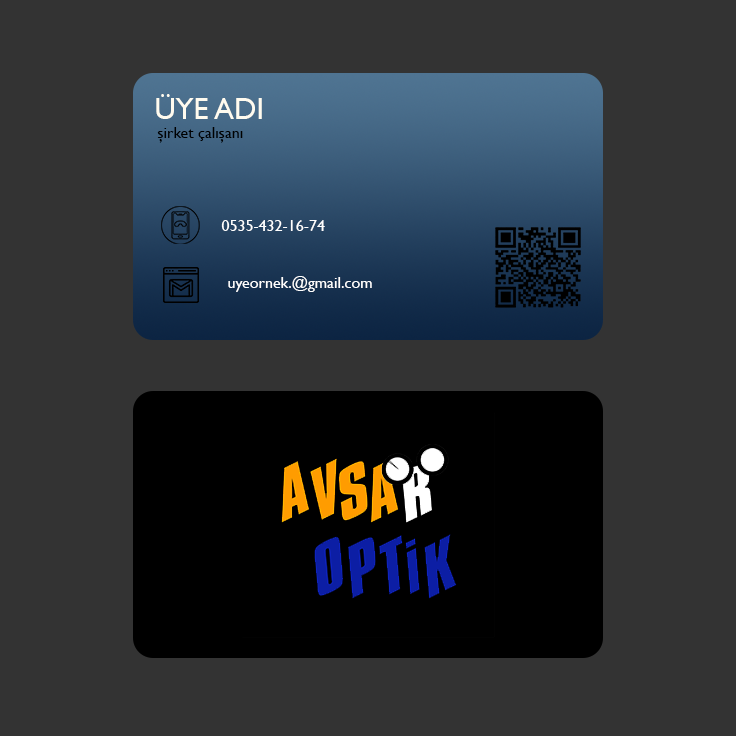
<style>
.page{position:relative;width:736px;height:736px;background:#333333}
.page>*{position:absolute;margin:0}
.t1{font:30px "GillSansMT";color:#fffbef}
.t2{font:16px "GillSansMT";color:#000000}
.t3{font:16px "GillSansMT";color:#ffffff}
</style>
<div class="page">
<p class="t1" style="left:156px;top:94px;width:106px;height:25px">ÜYE ADI</p>
<p class="t2" style="left:157px;top:127px;width:86px;height:16px">şirket çalışanı</p>
<p class="t3" style="left:221px;top:220px;width:104px;height:11px">0535-432-16-74</p>
<p class="t3" style="left:228px;top:276px;width:144px;height:16px">uyeornek.@gmail.com</p>
</div>
